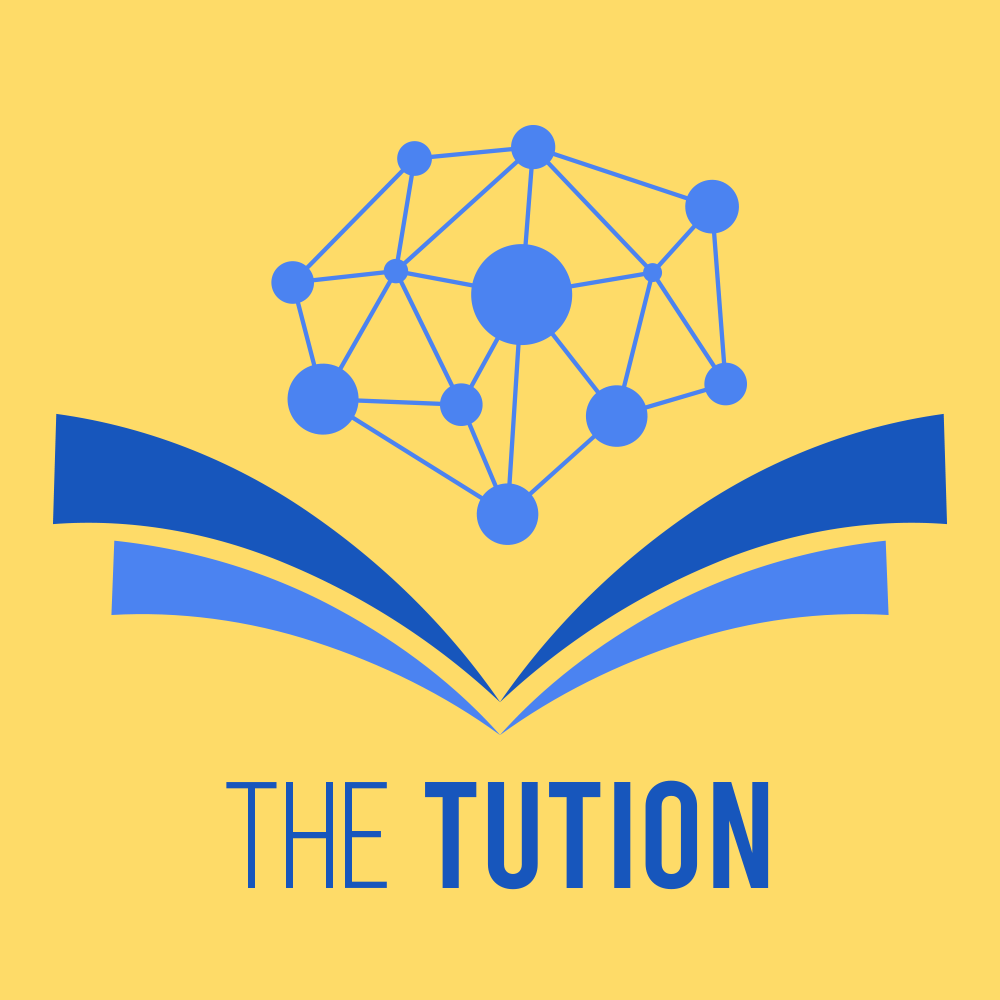
<style>
.page{position:relative;width:1000px;height:1000px;background:#fedb68}
.page>*{position:absolute;margin:0}
.t1{font:151.3px "Bebas-Regular";color:#1756bc}
.t2{font:151.3px "BebasNeue-Book";color:#1756bc}
</style>
<div class="page">
<p class="t1" style="left:226px;top:780px;width:543px;height:110px"><span class="t2">The</span> Tution</p>
</div>
